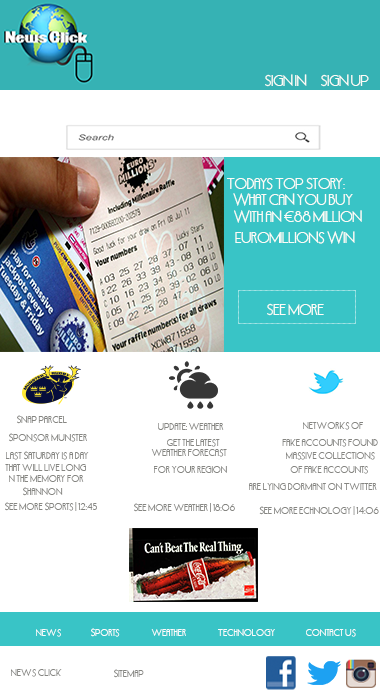
<style>
.page{position:relative;width:380px;height:700px;background:#ffffff}
.page>*{position:absolute;margin:0}
.t1{font:12.5px "Delhi";letter-spacing:0.002em;color:#fcfcf7}
.t2{font:8.3px "Delhi";letter-spacing:0.002em;color:#868682}
.t3{font:8.3px "Delhi";letter-spacing:0.002em;color:#fdfdfd}
</style>
<div class="page">
<p class="t1" style="left:265px;top:74px;width:42px;height:13px">Sign In</p>
<p class="t1" style="left:321px;top:74px;width:48px;height:13px">Sign Up</p>
<p class="t1" style="left:227px;top:177px;width:118px;height:13px">Todays Top Story:</p>
<p class="t1" style="left:233px;top:193px;width:120px;height:13px">What can you buy</p>
<p class="t1" style="left:234px;top:210px;width:128px;height:13px">with an €88 million</p>
<p class="t1" style="left:235px;top:231px;width:120px;height:13px">EuroMillions win</p>
<p class="t1" style="left:267px;top:303px;width:57px;height:13px">See More</p>
<p class="t2" style="left:17px;top:415px;width:50px;height:9px">Snap Parcel</p>
<p class="t2" style="left:158px;top:423px;width:66px;height:7px">Update: Weather</p>
<p class="t2" style="left:303px;top:422px;width:60px;height:8px">Networks of</p>
<p class="t2" style="left:9px;top:433px;width:78px;height:9px">Sponsor Munster</p>
<p class="t2" style="left:151px;top:449px;width:76px;height:8px">Weather forecast</p>
<p class="t2" style="left:167px;top:439px;width:53px;height:8px">Get the latest</p>
<p class="t2" style="left:282px;top:439px;width:96px;height:8px">fake accounts found</p>
<p class="t2" style="left:6px;top:451px;width:83px;height:9px">Last Saturday is a day</p>
<p class="t2" style="left:286px;top:452px;width:89px;height:8px">Massive collections</p>
<p class="t2" style="left:5px;top:464px;width:81px;height:7px">that will live long</p>
<p class="t2" style="left:154px;top:466px;width:73px;height:7px">for your region</p>
<p class="t2" style="left:290px;top:466px;width:78px;height:8px">of fake accounts</p>
<p class="t2" style="left:9px;top:475px;width:75px;height:7px">n the memory for</p>
<p class="t2" style="left:249px;top:483px;width:128px;height:7px">are lying dormant on Twitter</p>
<p class="t2" style="left:23px;top:487px;width:40px;height:9px">Shannon</p>
<p class="t2" style="left:5px;top:502px;width:92px;height:9px">See More Sports | 12:45</p>
<p class="t2" style="left:134px;top:503px;width:101px;height:9px">See More Weather | 18:06</p>
<p class="t2" style="left:259px;top:506px;width:120px;height:9px">See More echnology | 14:06</p>
<p class="t3" style="left:36px;top:629px;width:25px;height:8px">News</p>
<p class="t3" style="left:91px;top:628px;width:29px;height:9px">Sports</p>
<p class="t3" style="left:151px;top:629px;width:35px;height:7px">Weather</p>
<p class="t3" style="left:218px;top:629px;width:57px;height:7px">Technology</p>
<p class="t3" style="left:306px;top:629px;width:50px;height:8px">Contact Us</p>
<p class="t2" style="left:11px;top:669px;width:51px;height:8px">News Click</p>
<p class="t2" style="left:114px;top:669px;width:30px;height:9px">SiteMap</p>
</div>
